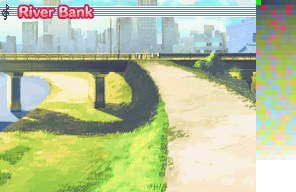
<style>
.page{position:relative;width:296px;height:192px}
.page>*{position:absolute;margin:0}
.t1{font:12px "HummingStd-E";letter-spacing:0.02em}
</style>
<div class="page">
<p class="t1" style="left:19px;top:6px;width:74px;height:11px">River Bank</p>
</div>
